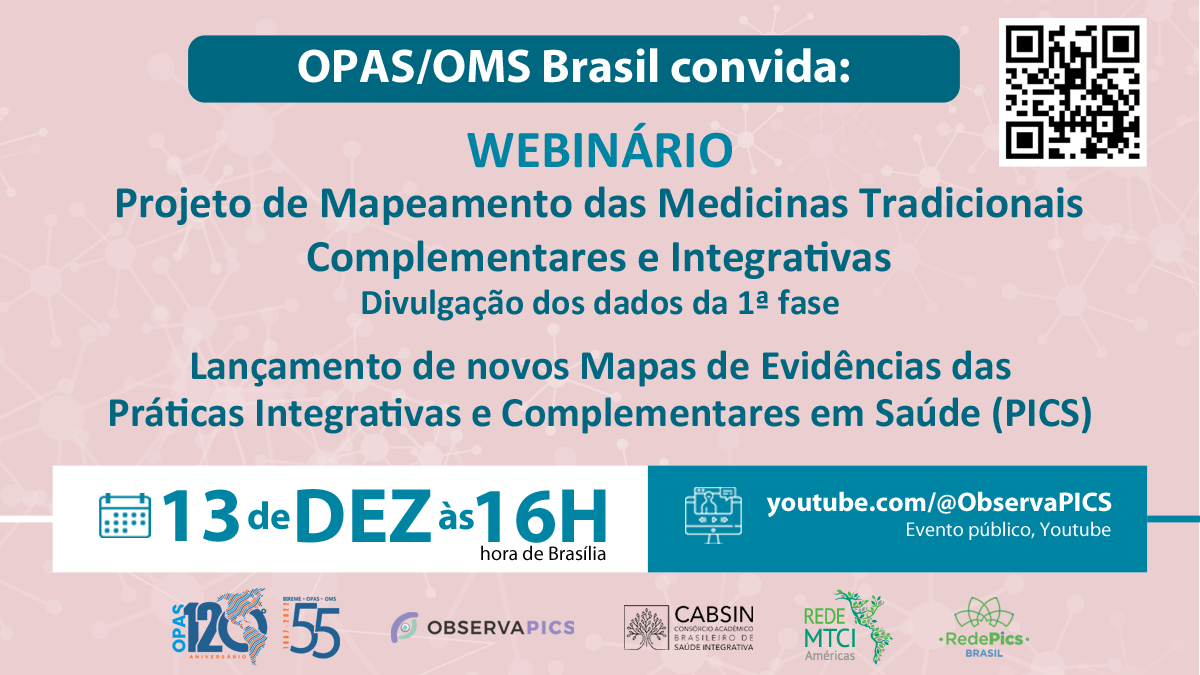
<style>
.page{position:relative;width:1200px;height:675px;background:#ebced0}
.page>*{position:absolute;margin:0}
.t1{font:47.6px "MyriadPro-Bold";color:#ffffff}
.t2{font:53.6px "Calibri-Bold";color:#0084a3}
.t3{font:45px/26.5px "Calibri-Bold";color:#006780}
.t4{font:36px "Calibri-Bold";color:#006780}
.t5{font:42px/24.1px "Calibri-Bold";color:#006780}
.t6{font:77.9px "MyriadPro-Bold";color:#0084a3}
.t7{font:27.2px "MyriadPro-Bold";color:#ffffff}
.t8{font:39px "MyriadPro-Bold";color:#0084a3}
.t9{font:20px "MyriadPro-Regular";color:#ffffff}
.t10{font:20px "MyriadPro-Regular";color:#000000}
</style>
<div class="page">
<p class="t1" style="left:298px;top:48px;width:551px;height:36px">OPAS/OMS Brasil convida:</p>
<p class="t2" style="left:467px;top:122px;width:265px;height:46px">WEBINÁRIO</p>
<p class="t3" style="left:117px;top:186px;width:966px;height:93px;text-align:center">Projeto de Mapeamento das Medicinas Tradicionais<br>Complementares e Integrativas</p>
<p class="t4" style="left:362px;top:289px;width:477px;height:32px">Divulgação dos dados da 1ª fase</p>
<p class="t5" style="left:110px;top:350px;width:981px;height:84px;text-align:center">Lançamento de novos Mapas de Evidências das<br>Práticas Integrativas e Complementares em Saúde (PICS)</p>
<p class="t6" style="left:163px;top:489px;width:76px;height:53px">13</p>
<p class="t6" style="left:297px;top:489px;width:134px;height:54px">DEZ</p>
<p class="t6" style="left:476px;top:489px;width:130px;height:54px">16H</p>
<p class="t7" style="left:766px;top:491px;width:346px;height:26px">youtube.com/@ObservaPICS</p>
<p class="t8" style="left:248px;top:501px;width:42px;height:29px">de</p>
<p class="t8" style="left:439px;top:501px;width:35px;height:29px">às</p>
<p class="t9" style="left:907px;top:521px;width:204px;height:19px">Evento público, Youtube</p>
<p class="t10" style="left:481px;top:545px;width:125px;height:16px">hora de Brasília</p>
</div>
